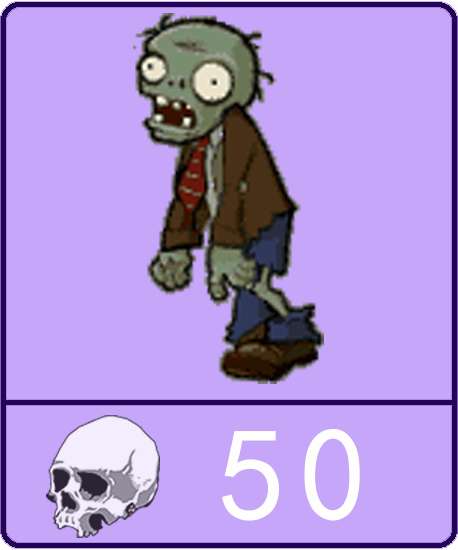
<style>
.page{position:relative;width:458px;height:550px;background:#c6a6f9}
.page>*{position:absolute;margin:0}
.t1{font:133.3px "SimHei";letter-spacing:0.1em;color:#fefefc}
</style>
<div class="page">
<p class="t1" style="left:222px;top:429px;width:138px;height:92px">50</p>
</div>
